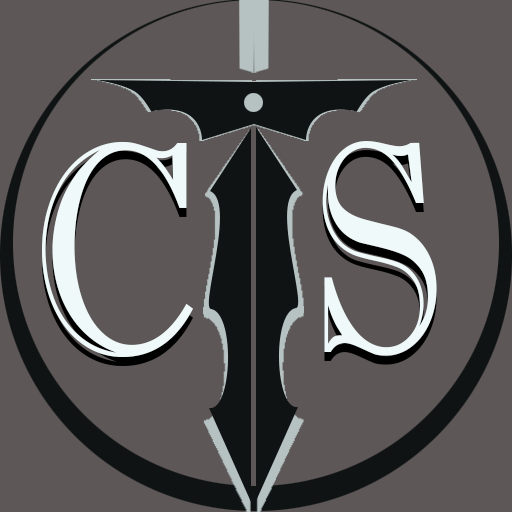
<style>
.page{position:relative;width:512px;height:512px;background:#5d5757}
.page>*{position:absolute;margin:0}
.t1{font:300px "ImprintMT-Shadow";color:#f0f9f9;scale:0.76 1}
</style>
<div class="page">
<p class="t1" style="left:42px;top:141px;width:395px;height:216px">C  S</p>
</div>
